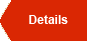
<style>
.page{position:relative;width:87px;height:41px;background:#da2703}
.page>*{position:absolute;margin:0}
.t1{font:12px "Arial-BoldMT";color:#ffffff}
</style>
<div class="page">
<p class="t1" style="left:29px;top:15px;width:39px;height:9px">Details</p>
</div>
